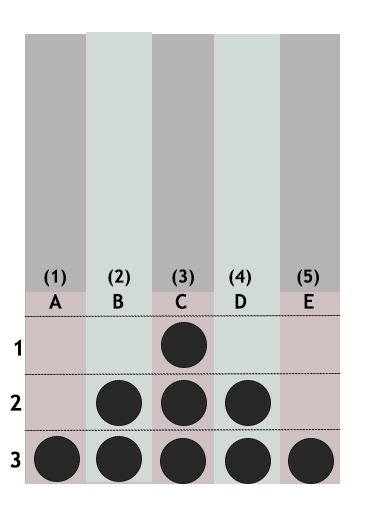
<style>
.page{position:relative;width:365px;height:512px;background:#d2dad9}
.page>*{position:absolute;margin:0}
.t1{font:18px "TrebuchetMS-Bold";color:#000000}
.t2{font:20px "TrebuchetMS-Bold";color:#000000}
.t3{font:22px "TrebuchetMS-Bold";color:#000000}
</style>
<div class="page">
<p class="t1" style="left:44px;top:269px;width:22px;height:18px">(1)</p>
<p class="t1" style="left:108px;top:269px;width:22px;height:18px">(2)</p>
<p class="t1" style="left:172px;top:269px;width:22px;height:18px">(3)</p>
<p class="t1" style="left:229px;top:269px;width:22px;height:18px">(4)</p>
<p class="t1" style="left:297px;top:269px;width:22px;height:18px">(5)</p>
<p class="t2" style="left:49px;top:294px;width:13px;height:15px">A</p>
<p class="t2" style="left:113px;top:294px;width:11px;height:15px">B</p>
<p class="t2" style="left:175px;top:293px;width:12px;height:16px">C</p>
<p class="t2" style="left:235px;top:294px;width:12px;height:15px">D</p>
<p class="t2" style="left:304px;top:294px;width:10px;height:15px">E</p>
<p class="t3" style="left:14px;top:339px;width:7px;height:17px">1</p>
<p class="t3" style="left:10px;top:394px;width:12px;height:17px">2</p>
<p class="t3" style="left:10px;top:451px;width:11px;height:17px">3</p>
</div>
